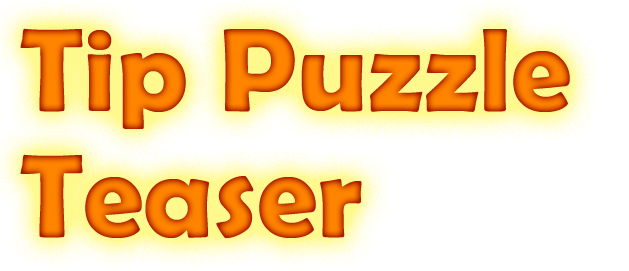
<style>
.page{position:relative;width:629px;height:271px;background:#ffffff}
.page>*{position:absolute;margin:0}
.t1{font:120px/126px "BerlinSansFBDemi-Bold"}
</style>
<div class="page">
<p class="t1" style="left:20px;top:28px;width:550px;height:210px">Tip Puzzle<br>Teaser</p>
</div>
